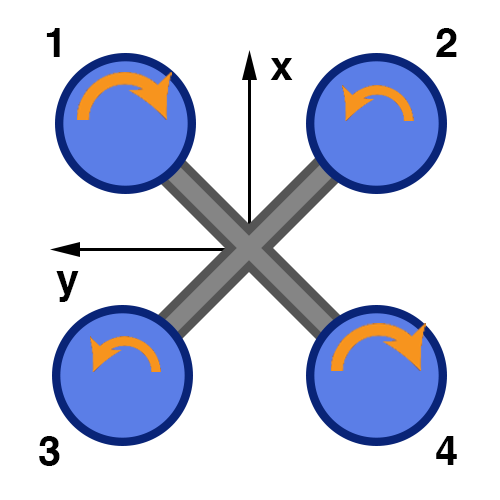
<style>
.page{position:relative;width:500px;height:500px;background:#ffffff}
.page>*{position:absolute;margin:0}
.t1{font:41.7px "Helvetica-Bold";letter-spacing:0.01em;color:#000000}
</style>
<div class="page">
<p class="t1" style="left:46px;top:28px;width:14px;height:29px">1</p>
<p class="t1" style="left:436px;top:28px;width:21px;height:29px">2</p>
<p class="t1" style="left:270px;top:58px;width:23px;height:22px">x</p>
<p class="t1" style="left:56px;top:271px;width:23px;height:31px">y</p>
<p class="t1" style="left:39px;top:436px;width:21px;height:30px">3</p>
<p class="t1" style="left:436px;top:436px;width:21px;height:29px">4</p>
</div>
